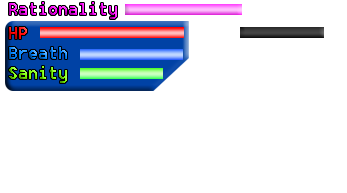
<style>
.page{position:relative;width:347px;height:193px;background:#ffffff}
.page>*{position:absolute;margin:0}
.t1{font:18px "8514oem"}
</style>
<div class="page">
<p class="t1" style="left:9px;top:2px;width:108px;height:17px">Rationality</p>
<p class="t1" style="left:9px;top:27px;width:18px;height:12px">HP</p>
<p class="t1" style="left:9px;top:47px;width:58px;height:12px">Breath</p>
<p class="t1" style="left:9px;top:66px;width:58px;height:17px">Sanity</p>
</div>
